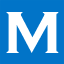
<style>
.page{position:relative;width:64px;height:64px;background:#0174c8}
.page>*{position:absolute;margin:0}
.t1{font:61.1px "CopperplateGothic-Bold";color:#ffffff}
</style>
<div class="page">
<p class="t1" style="left:6px;top:12px;width:53px;height:41px">M</p>
</div>
